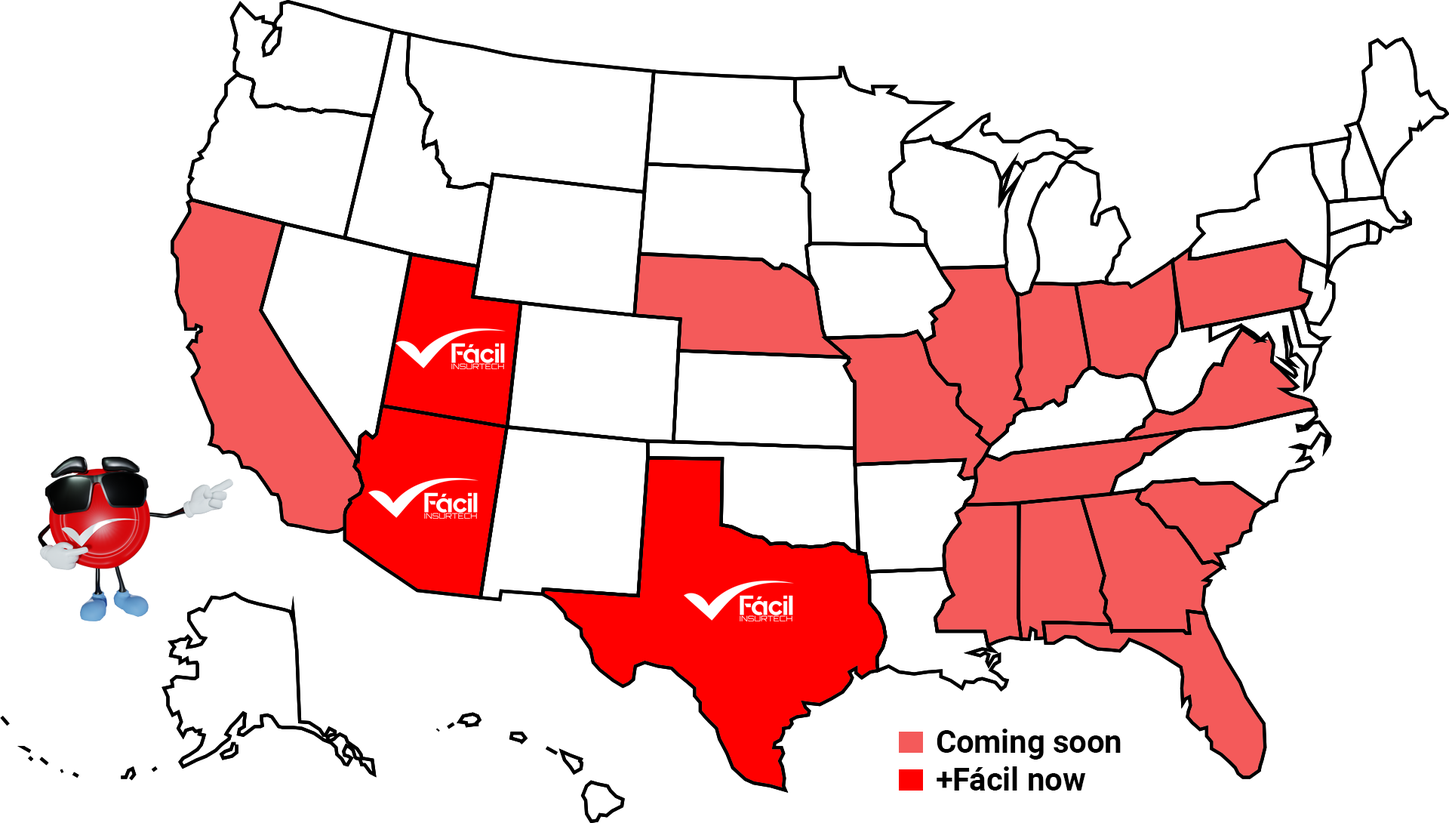
<style>
.page{position:relative;width:1449px;height:823px;background:#ffffff}
.page>*{position:absolute;margin:0}
.t1{font:31.5px "Roboto-Bold";color:#000000}
</style>
<div class="page">
<p class="t1" style="left:937px;top:728px;width:184px;height:62px">Coming soon<br>+Fácil now</p>
</div>
